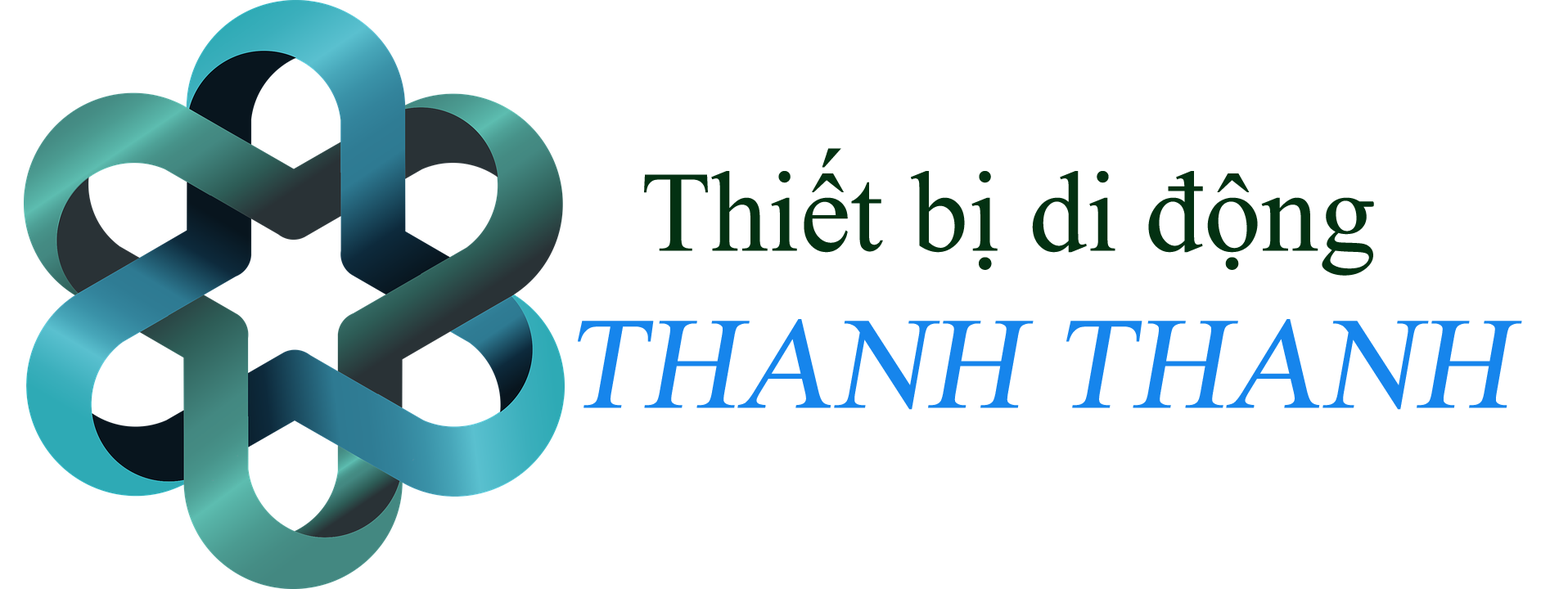
<style>
.page{position:relative;width:1568px;height:589px;background:#ffffff}
.page>*{position:absolute;margin:0}
.t1{font:114.6px "TimesNewRomanPSMT";color:#033112}
.t2{font:130.9px "TimesNewRomanPSMT";color:#1685ec;font-style:italic}
</style>
<div class="page">
<p class="t1" style="left:578px;top:148px;width:944px;height:262px;text-align:center">Thiết bị di động<br><span class="t2">THANH THANH</span></p>
</div>
